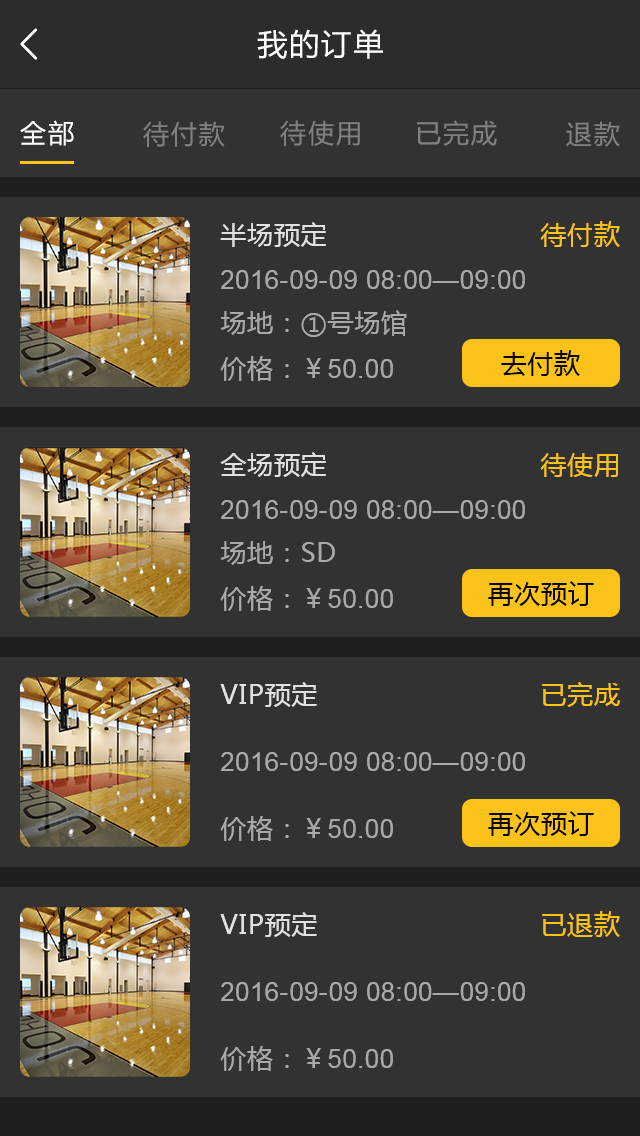
<style>
.page{position:relative;width:640px;height:1136px;background:#323232}
.page>*{position:absolute;margin:0}
.t1{font:30px "MicrosoftYaHei";letter-spacing:0.07em;color:#ffffff}
.t2{font:26px "MicrosoftYaHei";letter-spacing:0.07em;color:#ffffff}
.t3{font:26px "MicrosoftYaHei";letter-spacing:0.07em;color:#818181}
.t4{font:26px "MicrosoftYaHei";letter-spacing:0.03em;color:#e1e1e1}
.t5{font:26px "MicrosoftYaHei";letter-spacing:0.03em;color:#fbc219}
.t6{font:26px "ArialMT";letter-spacing:0.03em;color:#a9a9a9}
.t7{font:26px "MicrosoftYaHei";letter-spacing:0.03em;color:#a9a9a9}
.t8{font:26px "MicrosoftYaHei";letter-spacing:0.03em;color:#010101}
</style>
<div class="page">
<p class="t1" style="left:257px;top:29px;width:126px;height:30px">我的订单</p>
<p class="t2" style="left:20px;top:120px;width:54px;height:26px">全部</p>
<p class="t3" style="left:143px;top:121px;width:82px;height:26px">待付款</p>
<p class="t3" style="left:280px;top:120px;width:80px;height:26px">待使用</p>
<p class="t3" style="left:417px;top:120px;width:80px;height:26px">已完成</p>
<p class="t3" style="left:566px;top:121px;width:54px;height:26px">退款</p>
<p class="t4" style="left:220px;top:222px;width:106px;height:25px">半场预定</p>
<p class="t5" style="left:540px;top:221px;width:80px;height:26px">待付款</p>
<p class="t6" style="left:221px;top:270px;width:304px;height:19px">2016-09-09 08:00—09:00</p>
<p class="t7" style="left:220px;top:310px;width:187px;height:27px">场地：①号场馆</p>
<p class="t8" style="left:501px;top:350px;width:79px;height:26px">去付款</p>
<p class="t6" style="left:220px;top:355px;width:173px;height:26px"><span class="t7">价格：￥</span>50.00</p>
<p class="t4" style="left:220px;top:452px;width:106px;height:25px">全场预定</p>
<p class="t5" style="left:540px;top:453px;width:78px;height:24px">待使用</p>
<p class="t6" style="left:221px;top:500px;width:304px;height:19px">2016-09-09 08:00—09:00</p>
<p class="t7" style="left:220px;top:541px;width:115px;height:24px">场地：SD</p>
<p class="t8" style="left:488px;top:581px;width:106px;height:25px">再次预订</p>
<p class="t6" style="left:220px;top:585px;width:173px;height:26px"><span class="t7">价格：￥</span>50.00</p>
<p class="t4" style="left:220px;top:682px;width:97px;height:25px">VIP预定</p>
<p class="t5" style="left:542px;top:682px;width:78px;height:25px">已完成</p>
<p class="t6" style="left:221px;top:752px;width:304px;height:19px">2016-09-09 08:00—09:00</p>
<p class="t6" style="left:220px;top:815px;width:173px;height:26px"><span class="t7">价格：￥</span>50.00</p>
<p class="t8" style="left:488px;top:811px;width:106px;height:25px">再次预订</p>
<p class="t4" style="left:220px;top:912px;width:97px;height:25px">VIP预定</p>
<p class="t5" style="left:542px;top:911px;width:78px;height:26px">已退款</p>
<p class="t6" style="left:221px;top:982px;width:304px;height:19px">2016-09-09 08:00—09:00</p>
<p class="t6" style="left:220px;top:1045px;width:173px;height:26px"><span class="t7">价格：￥</span>50.00</p>
</div>
